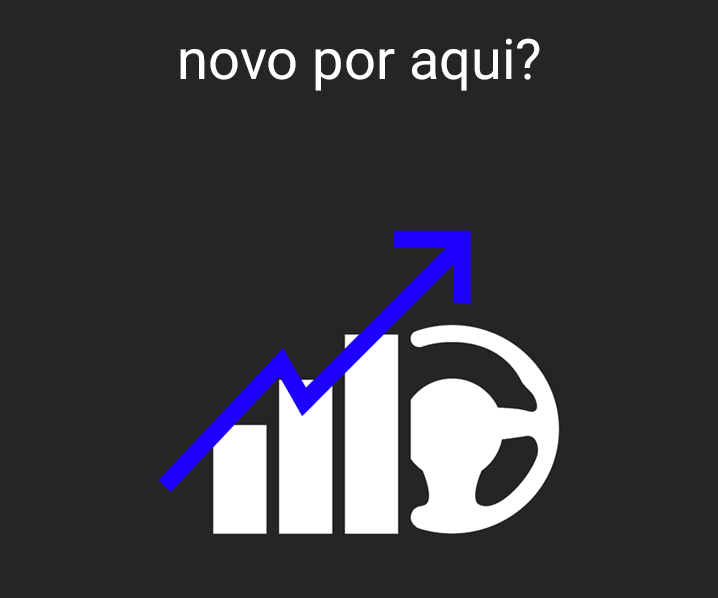
<style>
.page{position:relative;width:718px;height:598px;background:#252525}
.page>*{position:absolute;margin:0}
.t1{font:55.9px "Roboto-Regular";color:#ffffff}
</style>
<div class="page">
<p class="t1" style="left:180px;top:38px;width:360px;height:53px">novo por aqui?</p>
</div>
